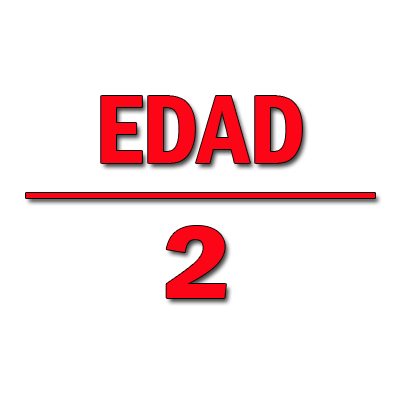
<style>
.page{position:relative;width:400px;height:400px;background:#ffffff}
.page>*{position:absolute;margin:0}
.t1{font:100px "FranklinGothic-DemiCond";color:#fb0517}
.t2{font:106.1px "FranklinGothic-DemiCond";color:#fb0517;scale:1.27 1}
</style>
<div class="page">
<p class="t1" style="left:101px;top:96px;width:201px;height:67px">EDAD</p>
<p class="t2" style="left:166px;top:226px;width:60px;height:72px">2</p>
</div>
